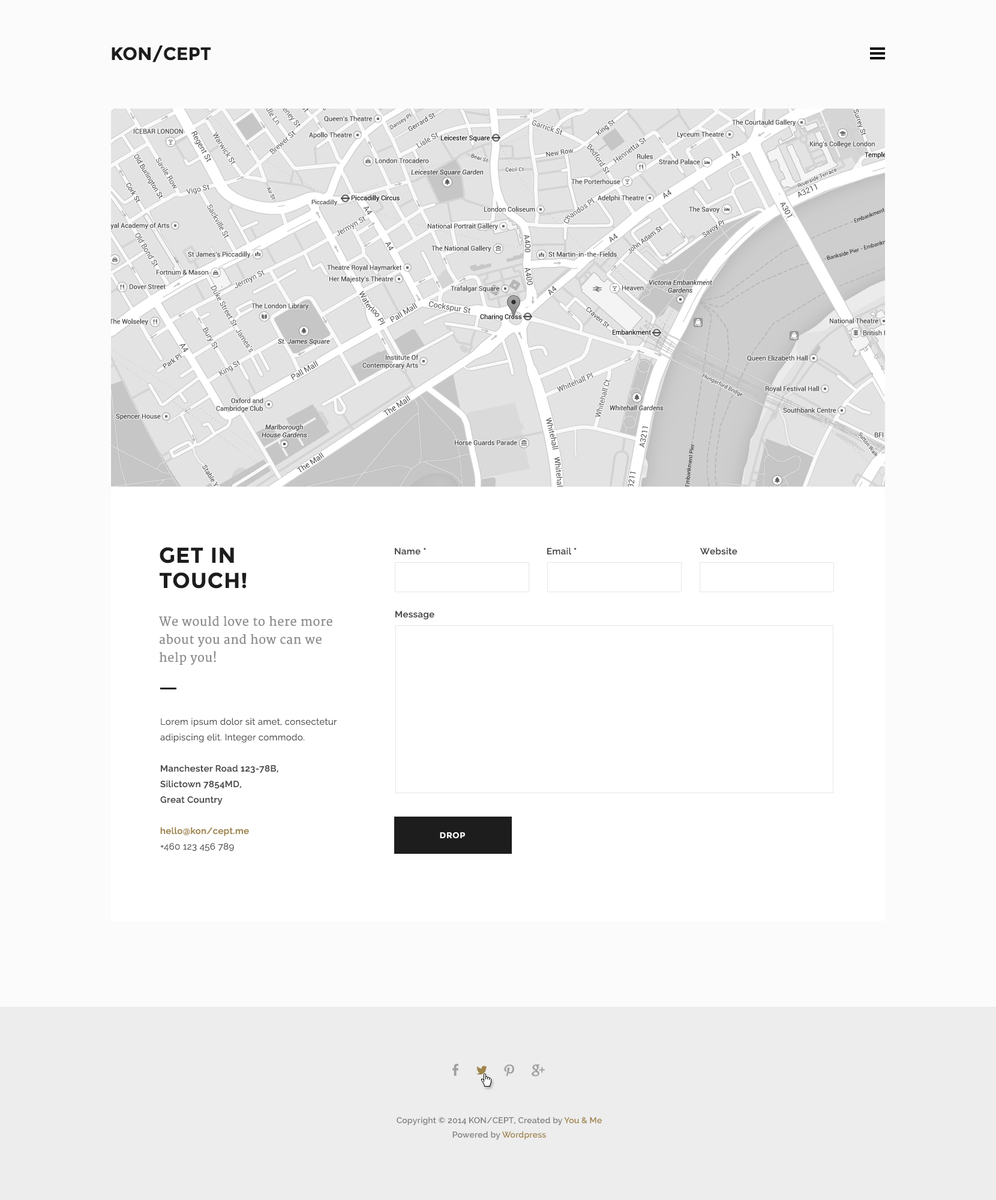
<style>
.page{position:relative;width:996px;height:1200px;background:#fbfbfb}
.page>*{position:absolute;margin:0}
.t1{font:18px "Montserrat-Bold";color:#1d1d1d;text-transform:uppercase}
.t2{font:21.6px/25.2px "Montserrat-Bold";letter-spacing:0.025em;color:#1d1d1d;text-transform:uppercase}
.t3{font:9px "Raleway-SemiBold";letter-spacing:0.025em;color:#4d4d4d}
.t4{font:12px/18px "Merriweather";letter-spacing:0.025em;color:#898989}
.t5{font:9px/15.6px "Raleway";letter-spacing:0.025em;color:#4d4d4d}
.t6{font:9px/15.6px "Raleway-SemiBold";letter-spacing:0.025em;color:#4d4d4d}
.t7{font:9px/15.6px "Raleway-SemiBold";letter-spacing:0.025em;color:#9e8348}
.t8{font:8.4px "Montserrat-Bold";letter-spacing:0.025em;color:#ffffff;text-transform:uppercase}
.t9{font:8.4px/14.4px "Raleway-SemiBold";letter-spacing:0.01em;color:#7d7d7d}
.t10{font:8.4px/14.4px "Raleway-SemiBold";letter-spacing:0.01em;color:#9e8348}
</style>
<div class="page">
<p class="t1" style="left:112px;top:45px;width:99px;height:17px">kON/CEPT</p>
<p class="t2" style="left:160px;top:547px;width:87px;height:42px">Get in <br>touch!</p>
<p class="t3" style="left:395px;top:548px;width:31px;height:7px">Name *</p>
<p class="t3" style="left:547px;top:547px;width:30px;height:8px">Email *</p>
<p class="t3" style="left:700px;top:547px;width:37px;height:8px">Website</p>
<p class="t4" style="left:159px;top:616px;width:173px;height:49px">We would love to here more about you and how can we help you!</p>
<p class="t3" style="left:395px;top:611px;width:39px;height:9px">Message</p>
<p class="t5" style="left:160px;top:718px;width:177px;height:133px">Lorem ipsum dolor sit amet, consectetur adipiscing elit. Integer commodo.<br><br><span class="t6">Manchester Road 123-78B,<br>Silictown 7854MD,<br>Great Country<br><br></span><span class="t7">hello@kon/cept.me<br></span>+460 123 456 789</p>
<p class="t8" style="left:440px;top:832px;width:25px;height:6px">Drop</p>
<p class="t9" style="left:397px;top:1117px;width:205px;height:23px;text-align:center">Copyright © 2014 KON/CEPT, Created by <span class="t10">You &amp; Me<br></span>Powered by <span class="t10">Wordpress</span></p>
</div>
